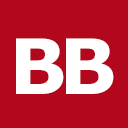
<style>
.page{position:relative;width:128px;height:128px;background:#b3071e}
.page>*{position:absolute;margin:0}
.t1{font:76.3px "Verdana-Bold";letter-spacing:-0.1em;color:#ffffff}
</style>
<div class="page">
<p class="t1" style="left:16px;top:38px;width:98px;height:56px">BB</p>
</div>
